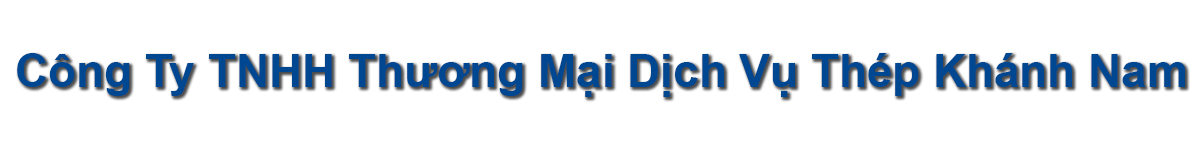
<style>
.page{position:relative;width:1200px;height:150px;background:#ffffff}
.page>*{position:absolute;margin:0}
.t1{font:45.8px "Arial-BoldMT";color:#004792}
</style>
<div class="page">
<p class="t1" style="left:17px;top:53px;width:1168px;height:44px">Công Ty TNHH Thương Mại Dịch Vụ Thép Khánh Nam</p>
</div>
